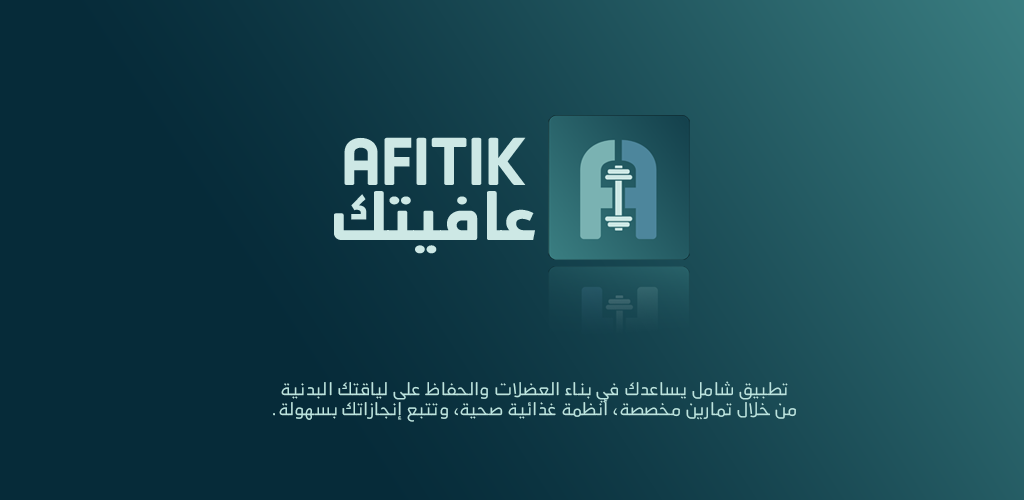
<style>
.page{position:relative;width:1024px;height:500px;background:#062b39}
.page>*{position:absolute;margin:0}
.t1{font:62.2px "AbdoMaster-Bold";color:#cde8e5}
.t2{font:16.7px "AbdoMaster-Book";color:#cde8e5}
</style>
<div class="page">
<p class="t1" style="left:344px;top:137px;width:182px;height:48px">AFITIK</p>
<p class="t1" style="left:334px;top:191px;width:201px;height:63px">عافيتك</p>
<p class="t2" style="left:273px;top:381px;width:523px;height:41px;text-align:center">تطبيق شامل يساعدك في بناء العضلات والحفاظ على لياقتك البدنية <br>من خلال تمارين مخصصة، أنظمة غذائية صحية، وتتبع إنجازاتك بسهولة.</p>
</div>
